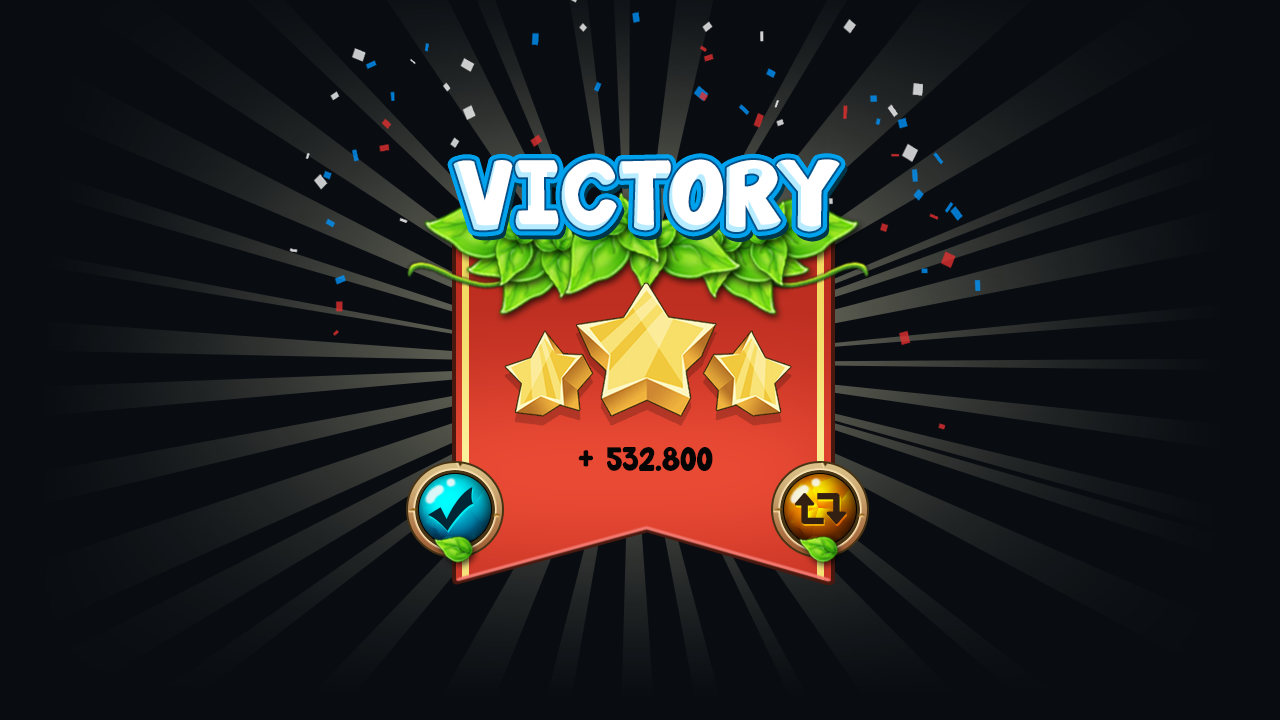
<style>
.page{position:relative;width:1280px;height:720px;background:#090d12}
.page>*{position:absolute;margin:0}
.t1{font:87.5px "JandaManateeSolid";color:#ffffff;text-transform:uppercase}
.t2{font:30px "JandaManateeSolid";color:#050505;text-transform:uppercase}
</style>
<div class="page">
<p class="t1" style="left:453px;top:159px;width:387px;height:73px">Victory</p>
<p class="t2" style="left:578px;top:447px;width:135px;height:24px">+ 532.800</p>
</div>
